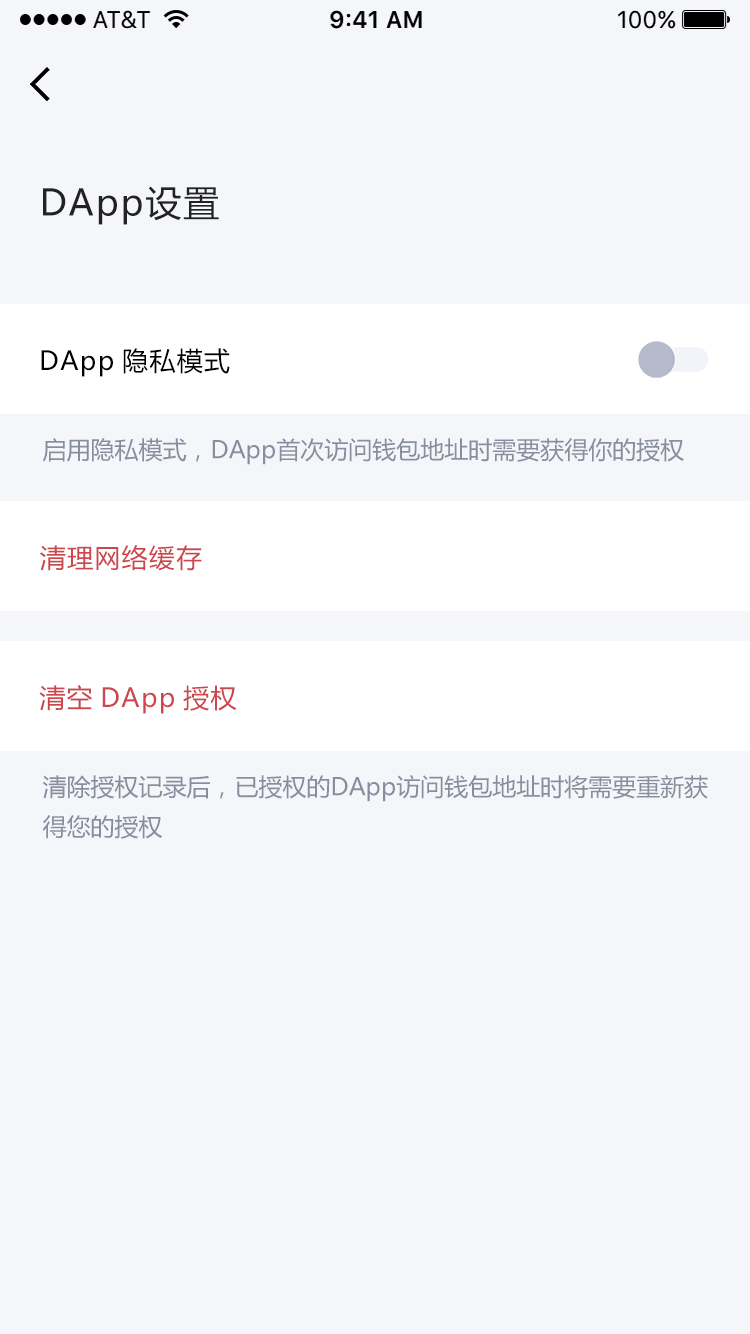
<style>
.page{position:relative;width:750px;height:1334px;background:#f5f6fa}
.page>*{position:absolute;margin:0}
.t1{font:36px "MicrosoftYaHei";letter-spacing:0.05em;color:#222222}
.t2{font:26px "MicrosoftYaHei";letter-spacing:0.05em;color:#000000}
.t3{font:24px "MicrosoftYaHei";color:#878e9f}
.t4{font:26px "MicrosoftYaHei";letter-spacing:0.05em;color:#cd464d}
.t5{font:24px/40px "MicrosoftYaHei";color:#878e9f}
</style>
<div class="page">
<p class="t1" style="left:43px;top:186px;width:176px;height:39px">DApp设置</p>
<p class="t2" style="left:41px;top:348px;width:189px;height:29px">DApp隐私模式</p>
<p class="t3" style="left:42px;top:438px;width:642px;height:27px">启用隐私模式，DApp首次访问钱包地址时需要获得你的授权</p>
<p class="t4" style="left:40px;top:545px;width:162px;height:26px">清理网络缓存</p>
<p class="t4" style="left:39px;top:685px;width:198px;height:29px">清空DApp授权</p>
<p class="t5" style="left:42px;top:775px;width:666px;height:64px">清除授权记录后，已授权的DApp访问钱包地址时将需要重新获<br>得您的授权</p>
</div>
